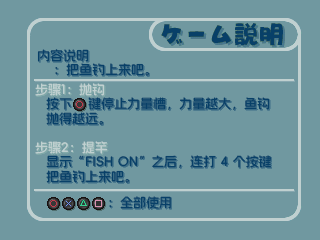
<style>
.page{position:relative;width:320px;height:240px;background:#7098a0}
.page>*{position:absolute;margin:0}
.t1{font:13px "AlimamaFangYuanTiVF-SemiBold";color:#084068}
.t2{font:13px "AlimamaFangYuanTiVF-SemiBold";color:#c0d0d0}
.t3{font:13px/15px "AlimamaFangYuanTiVF-SemiBold";color:#084068}
</style>
<div class="page">
<p class="t1" style="left:37px;top:49px;width:52px;height:13px">内容说明</p>
<p class="t1" style="left:55px;top:63px;width:94px;height:13px">：把鱼钓上来吧。</p>
<p class="t2" style="left:35px;top:83px;width:70px;height:13px">步骤1：抛钩</p>
<p class="t3" style="left:46px;top:97px;width:224px;height:28px">按下    键停止力量槽，力量越大，鱼钩抛得越远。</p>
<p class="t2" style="left:35px;top:141px;width:73px;height:13px">步骤2：提竿</p>
<p class="t3" style="left:46px;top:155px;width:225px;height:28px">显示“FISH ON”之后，连打 4 个按键把鱼钓上来吧。</p>
<p class="t1" style="left:109px;top:196px;width:62px;height:13px">：全部使用</p>
</div>
